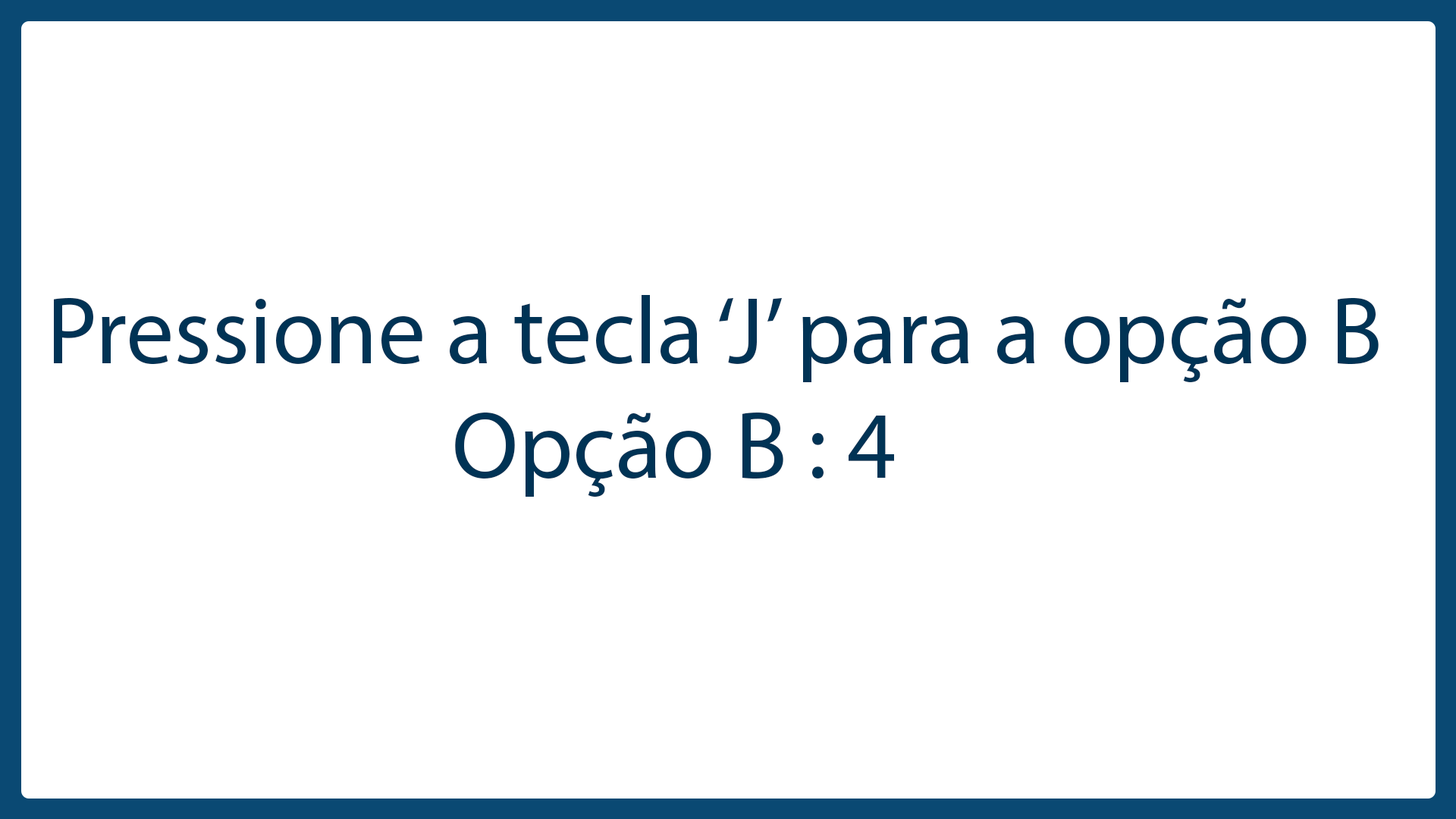
<style>
.page{position:relative;width:1456px;height:819px;background:#ffffff}
.page>*{position:absolute;margin:0}
.t1{font:95.9px "MyriadPro-Regular";color:#003355}
</style>
<div class="page">
<p class="t1" style="left:54px;top:295px;width:1325px;height:202px">Pressione a tecla ‘J’ para a opção B<br>                    Opção B : 4</p>
</div>
